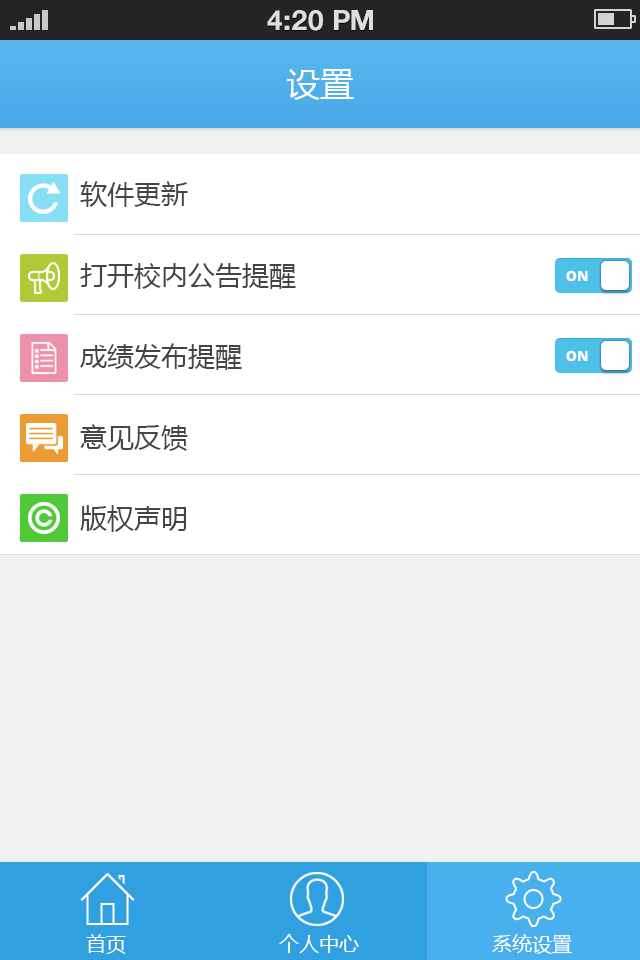
<style>
.page{position:relative;width:640px;height:960px;background:#ffffff}
.page>*{position:absolute;margin:0}
.t1{font:28px "HelveticaNeueLTStd-Bd";color:#dfdfdf;text-transform:uppercase}
.t2{font:34px "MicrosoftYaHei";color:#ffffff}
.t3{font:27px/81px "MicrosoftYaHei";color:#454545}
.t4{font:14px "OpenSans-Extrabold";color:#ffffff}
.t5{font:20px "MicrosoftYaHei";color:#ffffff}
</style>
<div class="page">
<p class="t1" style="left:267px;top:10px;width:106px;height:21px">4:20 PM</p>
<p class="t2" style="left:286px;top:69px;width:68px;height:31px">设置</p>
<p class="t3" style="left:80px;top:181px;width:216px;height:351px">软件更新<br>打开校内公告提醒<br>成绩发布提醒<br>意见反馈<br>版权声明</p>
<p class="t4" style="left:566px;top:270px;width:22px;height:12px">ON</p>
<p class="t4" style="left:566px;top:350px;width:22px;height:12px">ON</p>
<p class="t5" style="left:86px;top:934px;width:40px;height:20px">首页</p>
<p class="t5" style="left:279px;top:934px;width:80px;height:19px">个人中心</p>
<p class="t5" style="left:492px;top:934px;width:80px;height:20px">系统设置</p>
</div>
